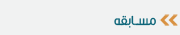
<style>
.page{position:relative;width:180px;height:35px;background:#f1f2f2}
.page>*{position:absolute;margin:0}
.t1{font:14px "Mj_Flow";letter-spacing:-0.001em;color:#0d6579}
</style>
<div class="page">
<p class="t1" style="left:114px;top:15px;width:42px;height:13px">مسـابقه</p>
</div>
